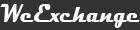
<style>
.page{position:relative;width:140px;height:30px;background:#333333}
.page>*{position:absolute;margin:0}
.t1{font:26.2px "Magneto-Bold";color:#ffffff;scale:0.8 1}
</style>
<div class="page">
<p class="t1" style="left:0px;top:4px;width:140px;height:24px">WeExchange</p>
</div>
